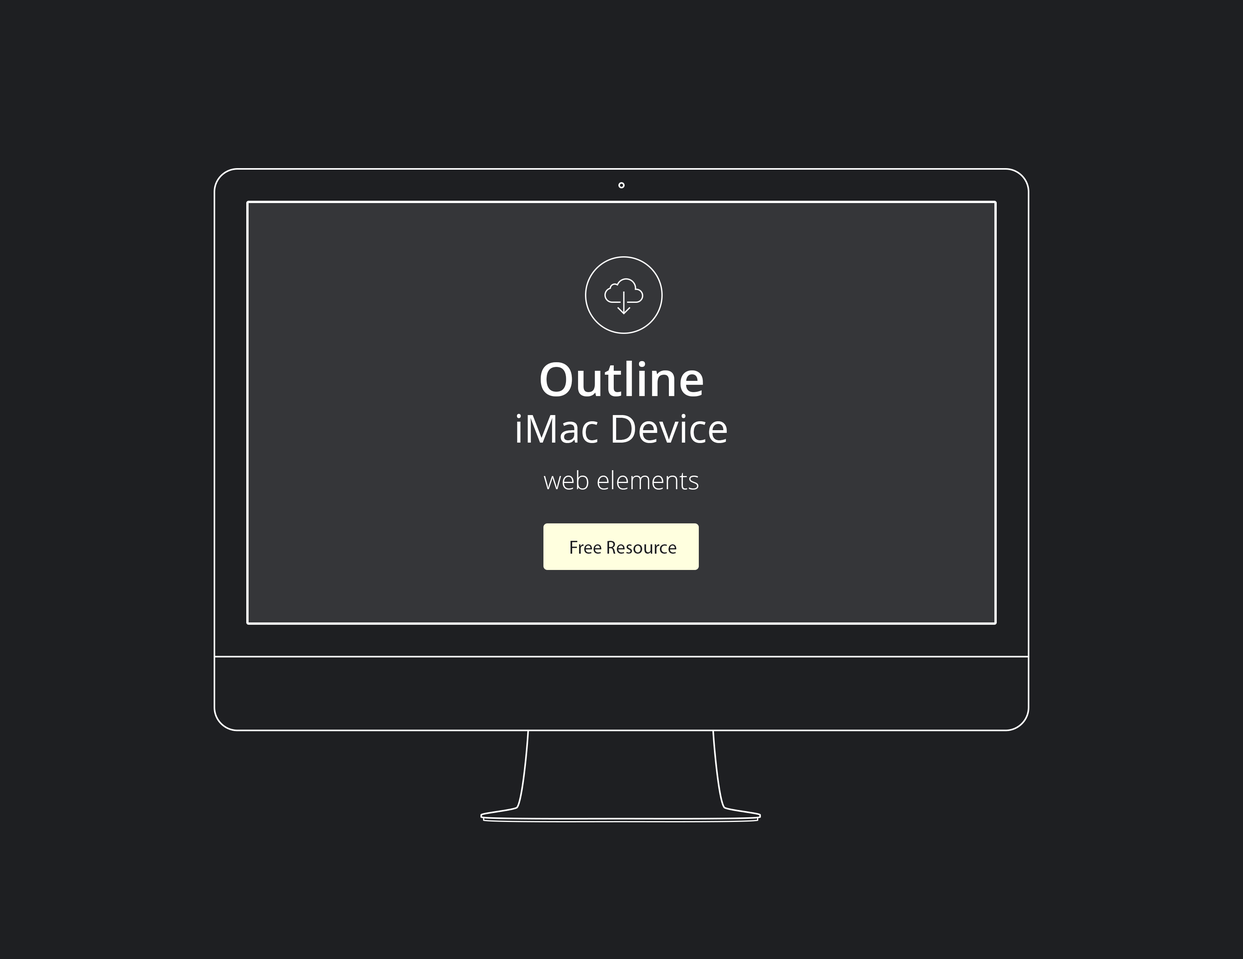
<style>
.page{position:relative;width:1243px;height:959px;background:#1e1f22}
.page>*{position:absolute;margin:0}
.t1{font:24.9px/46.6px "OpenSans-Light";color:#ffffff}
.t2{font:46.6px "OpenSans-Semibold";color:#ffffff}
.t3{font:38.8px/46.6px "OpenSans";color:#ffffff}
.t4{font:18.6px "MyriadPro-Regular";color:#1e1f23}
</style>
<div class="page">
<p class="t1" style="left:517px;top:361px;width:210px;height:129px;text-align:center"><span class="t2">Outline <br></span><span class="t3">iMac Device<br></span>web elements</p>
<p class="t4" style="left:570px;top:541px;width:106px;height:13px">Free Resource</p>
</div>
